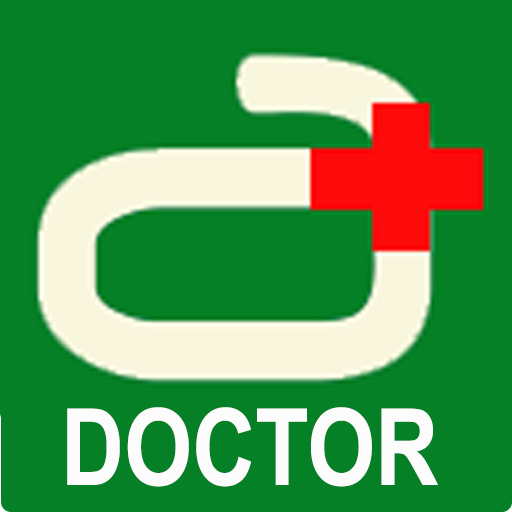
<style>
.page{position:relative;width:512px;height:512px;background:#058026}
.page>*{position:absolute;margin:0}
.t1{font:106.7px "ArialNarrow-Bold";color:#fcfcfc}
</style>
<div class="page">
<p class="t1" style="left:67px;top:407px;width:371px;height:80px">DOCTOR</p>
</div>
